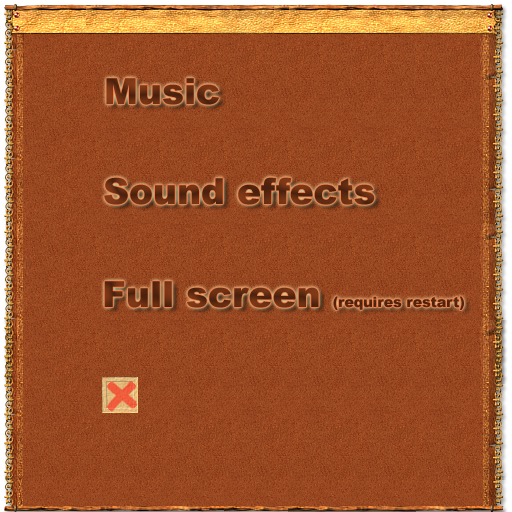
<style>
.page{position:relative;width:512px;height:512px}
.page>*{position:absolute;margin:0}
.t1{font:36px "Arial-Black"}
.t2{font:36px "Arial-Black";color:#652d13}
.t3{font:14px "Arial-Black";color:#5f2b12}
.t4{font:36px "Arial-Black";color:#5f2b12}
</style>
<div class="page">
<p class="t1" style="left:106px;top:78px;width:113px;height:27px">Music</p>
<p class="t2" style="left:104px;top:177px;width:271px;height:28px">Sound effects</p>
<p class="t3" style="left:104px;top:281px;width:360px;height:29px"><span class="t4">Full screen </span>(requires restart)</p>
</div>
